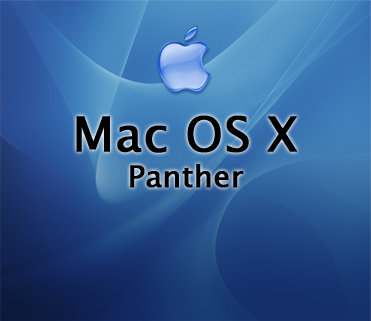
<style>
.page{position:relative;width:371px;height:321px}
.page>*{position:absolute;margin:0}
.t1{font:48px "LucidaGrande";color:#000000;font-weight:bold}
.t2{font:30px "LucidaGrande";color:#000000;font-weight:bold}
</style>
<div class="page">
<p class="t1" style="left:76px;top:115px;width:221px;height:73px;text-align:center">Mac OS X<br><span class="t2">Panther</span></p>
</div>
